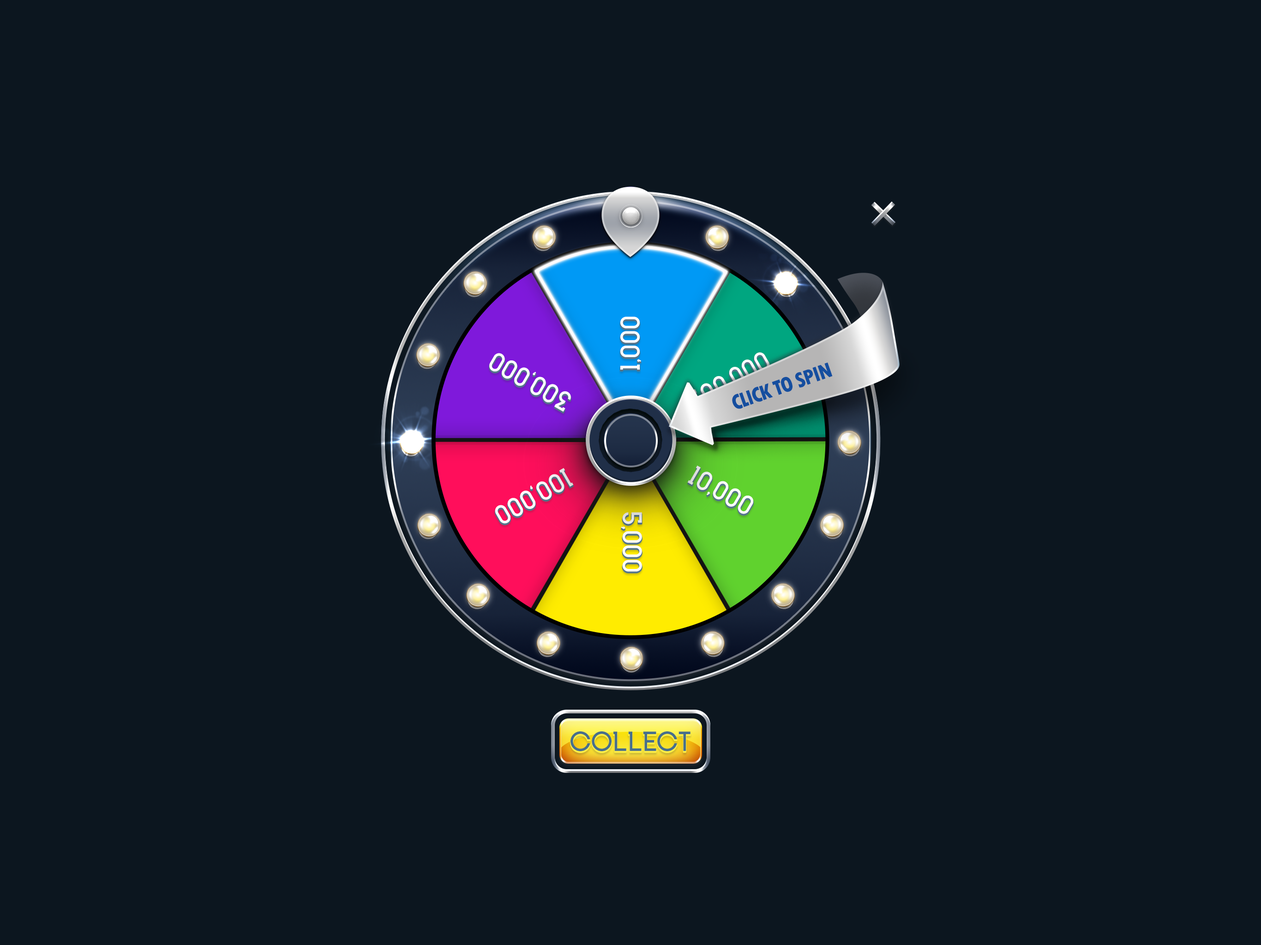
<style>
.page{position:relative;width:1261px;height:945px;background:#0c161f}
.page>*{position:absolute;margin:0}
.t1{font:27.7px "INKFERNO";letter-spacing:0.05em;color:#ffffff;text-transform:uppercase}
.t2{font:27.7px "INKFERNO";letter-spacing:0.05em;text-transform:uppercase}
.t3{font:22.2px "TwCenMT-CondensedExtraBold";letter-spacing:-0.05em;color:#154e9f;text-transform:uppercase}
.t4{font:27.7px "INKFERNO";color:#476f8b;text-transform:uppercase}
</style>
<div class="page">
<p class="t1" style="left:620px;top:317px;width:21px;height:53px;rotate:-90deg">1,000</p>
<p class="t1" style="left:489px;top:353px;width:82px;height:59px;rotate:-150deg">300,000</p>
<p class="t2" style="left:686px;top:352px;width:84px;height:57px;rotate:-30deg">500,000</p>
<p class="t3" style="left:732px;top:362px;width:101px;height:47px;rotate:-19deg">Click to spin</p>
<p class="t1" style="left:495px;top:468px;width:79px;height:56px;rotate:150deg">100,000</p>
<p class="t1" style="left:687px;top:466px;width:66px;height:48px;rotate:30deg">10,000</p>
<p class="t1" style="left:621px;top:512px;width:21px;height:60px;rotate:90deg">5,000</p>
<p class="t4" style="left:571px;top:732px;width:120px;height:20px">collect</p>
</div>
